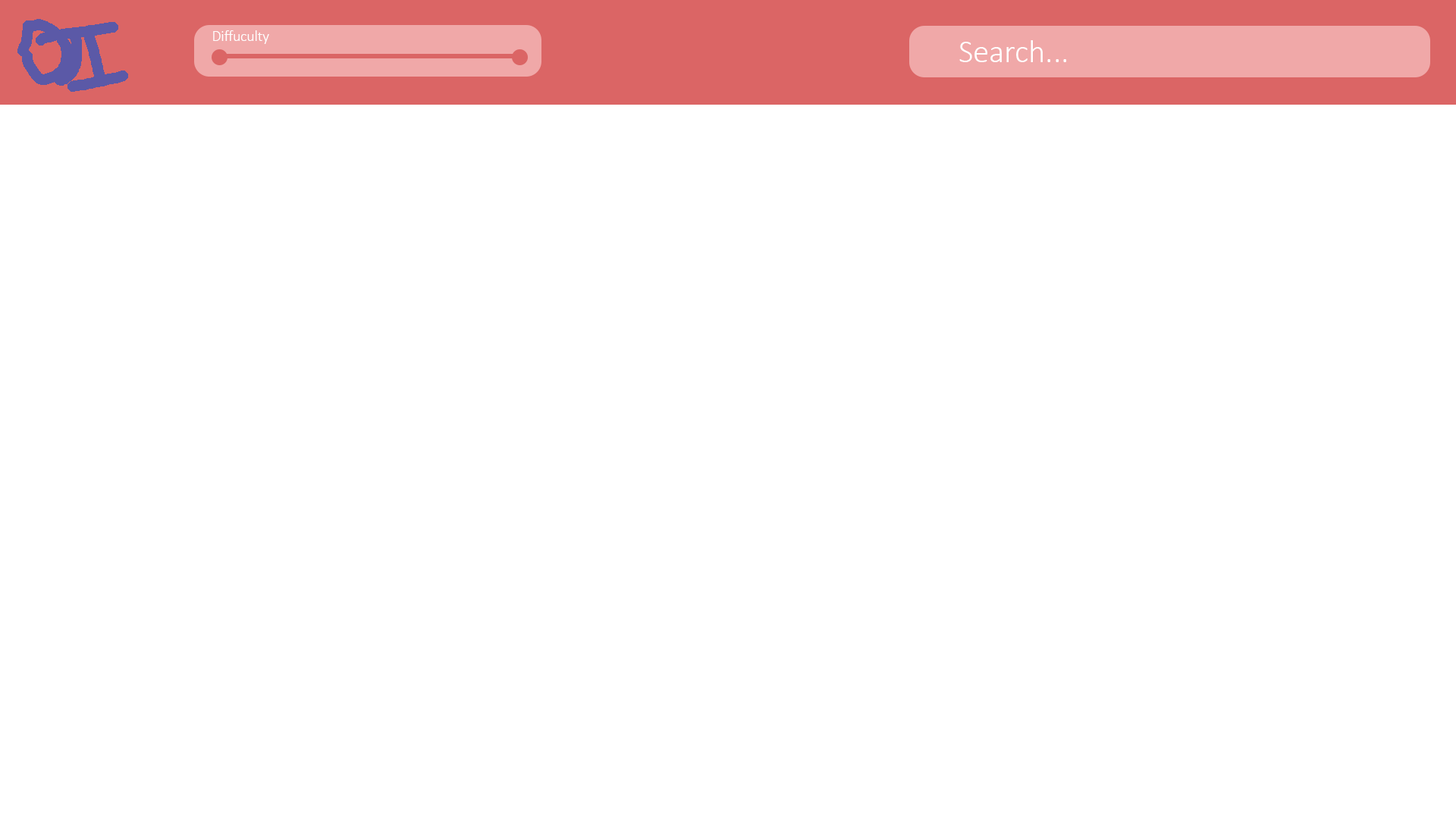
<style>
.page{position:relative;width:1456px;height:819px;background:#ffffff}
.page>*{position:absolute;margin:0}
.t1{font:14.8px "Calibri-Light";color:#ffffff}
.t2{font:32.3px "Calibri-Light";color:#ffffff}
</style>
<div class="page">
<p class="t1" style="left:213px;top:30px;width:56px;height:14px">Diffuculty</p>
<p class="t2" style="left:959px;top:40px;width:107px;height:22px">Search...</p>
</div>
